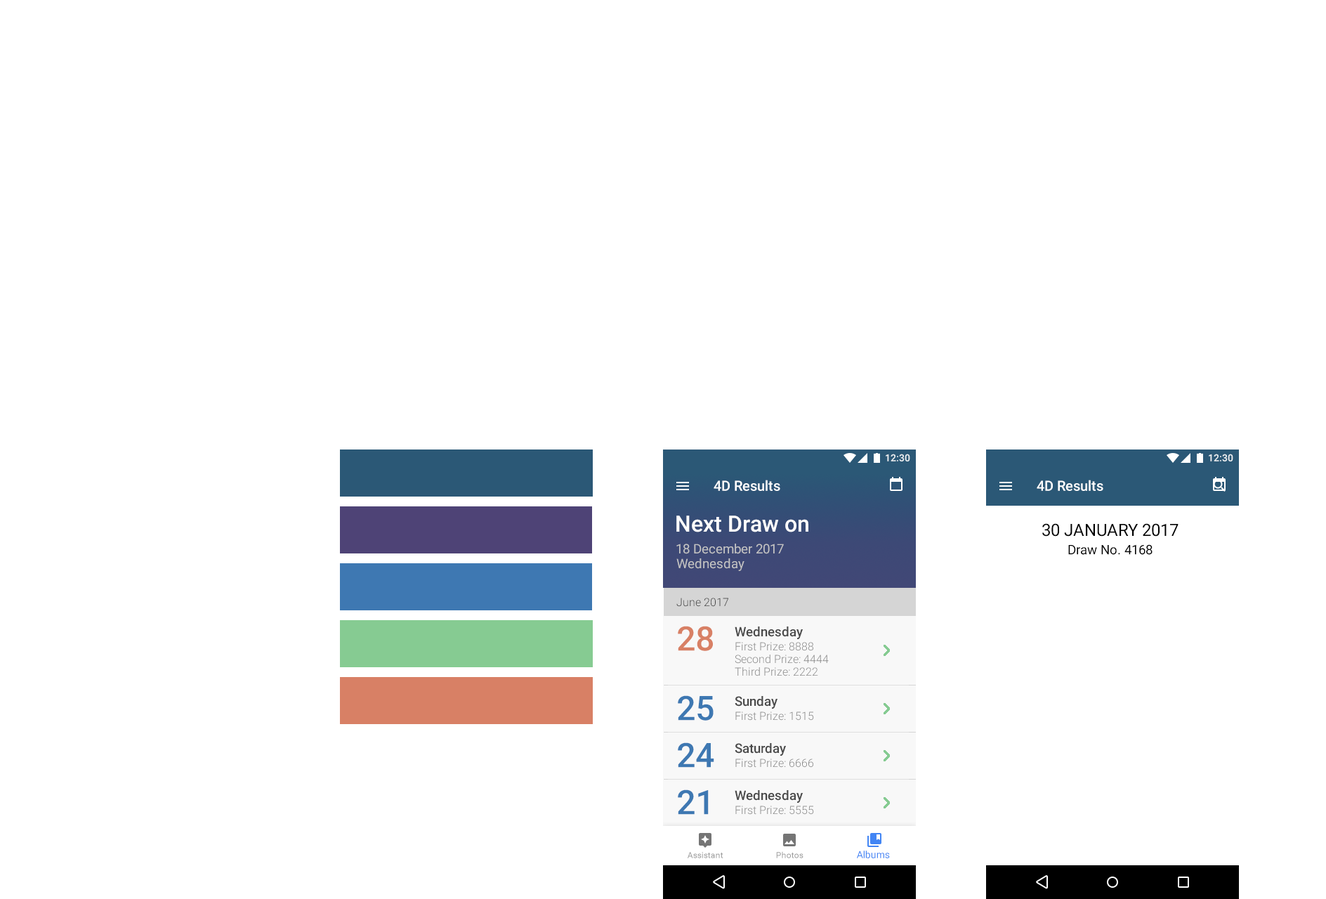
<style>
.page{position:relative;width:1326px;height:899px;background:#ffffff}
.page>*{position:absolute;margin:0}
.t1{font:9.8px "Roboto-Medium";color:#eaeff2}
.t2{font:14px "Roboto-Medium";color:#ffffff}
.t3{font:22.5px "Roboto-Medium";color:#ffffff}
.t4{font:16.9px "Roboto-Regular";color:#000000}
.t5{font:13.1px "Roboto-Regular";color:#c3c3c3}
.t6{font:13.1px "Roboto-Regular";color:#000000}
.t7{font:11.2px "Roboto-Light";color:#434343}
.t8{font:33.7px "Roboto-Medium";color:#d88065}
.t9{font:13.1px "Roboto-Medium";color:#494949}
.t10{font:11.2px "Roboto-Light";color:#8b8b8b}
.t11{font:33.7px "Roboto-Medium";color:#3e78b2}
.t12{font:8.4px "Roboto-Regular";color:#9a9a9a}
.t13{font:9.8px "Roboto-Regular";color:#4285f4}
</style>
<div class="page">
<p class="t1" style="left:886px;top:454px;width:24px;height:8px">12:30</p>
<p class="t1" style="left:1209px;top:454px;width:24px;height:8px">12:30</p>
<p class="t2" style="left:714px;top:480px;width:66px;height:11px">4D Results</p>
<p class="t2" style="left:1037px;top:480px;width:67px;height:11px">4D Results</p>
<p class="t3" style="left:676px;top:516px;width:133px;height:16px">Next Draw on</p>
<p class="t4" style="left:1042px;top:523px;width:137px;height:14px">30 JANUARY 2017</p>
<p class="t5" style="left:676px;top:544px;width:108px;height:10px">18 December 2017</p>
<p class="t6" style="left:1068px;top:544px;width:85px;height:11px">Draw No. 4168</p>
<p class="t5" style="left:676px;top:558px;width:69px;height:13px">Wednesday</p>
<p class="t7" style="left:676px;top:598px;width:52px;height:9px">June 2017</p>
<p class="t8" style="left:678px;top:626px;width:35px;height:25px">28</p>
<p class="t9" style="left:735px;top:627px;width:68px;height:12px">Wednesday</p>
<p class="t10" style="left:735px;top:642px;width:78px;height:9px">First Prize: 8888</p>
<p class="t10" style="left:735px;top:655px;width:94px;height:9px">Second Prize: 4444</p>
<p class="t10" style="left:735px;top:667px;width:83px;height:9px">Third Prize: 2222</p>
<p class="t11" style="left:678px;top:695px;width:36px;height:26px">25</p>
<p class="t9" style="left:735px;top:696px;width:43px;height:13px">Sunday</p>
<p class="t10" style="left:735px;top:712px;width:79px;height:9px">First Prize: 1515</p>
<p class="t11" style="left:678px;top:742px;width:36px;height:26px">24</p>
<p class="t9" style="left:735px;top:743px;width:51px;height:13px">Saturday</p>
<p class="t10" style="left:735px;top:759px;width:78px;height:9px">First Prize: 6666</p>
<p class="t11" style="left:678px;top:790px;width:31px;height:25px">21</p>
<p class="t9" style="left:735px;top:790px;width:68px;height:13px">Wednesday</p>
<p class="t10" style="left:735px;top:806px;width:79px;height:9px">First Prize: 5555</p>
<p class="t12" style="left:688px;top:852px;width:36px;height:6px">Assistant</p>
<p class="t12" style="left:776px;top:851px;width:28px;height:7px">Photos</p>
<p class="t13" style="left:857px;top:851px;width:33px;height:7px">Albums</p>
</div>
